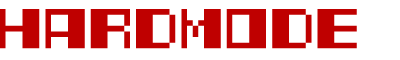
<style>
.page{position:relative;width:400px;height:60px;background:#ffffff}
.page>*{position:absolute;margin:0}
.t1{font:56px "PowerPixel-7";letter-spacing:0.01em;color:#bf0000}
</style>
<div class="page">
<p class="t1" style="left:0px;top:9px;width:357px;height:40px">HARDMODE</p>
</div>
